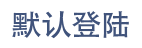
<style>
.page{position:relative;width:142px;height:48px;background:#ffffff}
.page>*{position:absolute;margin:0}
.t1{font:30px "AdobeHeitiStd-Regular";color:#40537b}
</style>
<div class="page">
<p class="t1" style="left:12px;top:11px;width:117px;height:28px">默认登陆</p>
</div>
